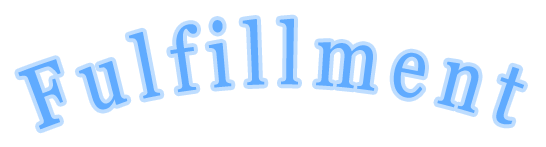
<style>
.page{position:relative;width:546px;height:147px;background:#ffffff}
.page>*{position:absolute;margin:0}
.t1{font:87.3px "Georgia";letter-spacing:0.2em;color:#60abff;scale:0.75 1}
</style>
<div class="page">
<p class="t1" style="left:18px;top:18px;width:506px;height:112px">Fulfillment</p>
</div>
